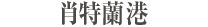
<style>
.page{position:relative;width:208px;height:27px;background:#ffffff}
.page>*{position:absolute;margin:0}
.t1{font:26px "RyuminPr6N-ExBold";color:#4c4843;scale:0.9 1}
</style>
<div class="page">
<p class="t1" style="left:61px;top:1px;width:87px;height:25px">肖特蘭港</p>
</div>
